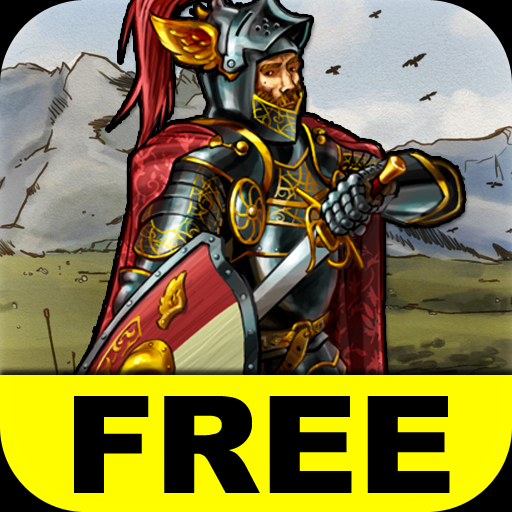
<style>
.page{position:relative;width:512px;height:512px}
.page>*{position:absolute;margin:0}
.t1{font:135.5px "Arial-Black";color:#000000}
</style>
<div class="page">
<p class="t1" style="left:74px;top:396px;width:376px;height:97px">FREE</p>
</div>
